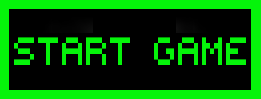
<style>
.page{position:relative;width:261px;height:99px;background:#000000}
.page>*{position:absolute;margin:0}
.t1{font:56.1px "PIXY";color:#05f40a;scale:0.73 1}
</style>
<div class="page">
<p class="t1" style="left:14px;top:37px;width:232px;height:28px">START GAME</p>
</div>
